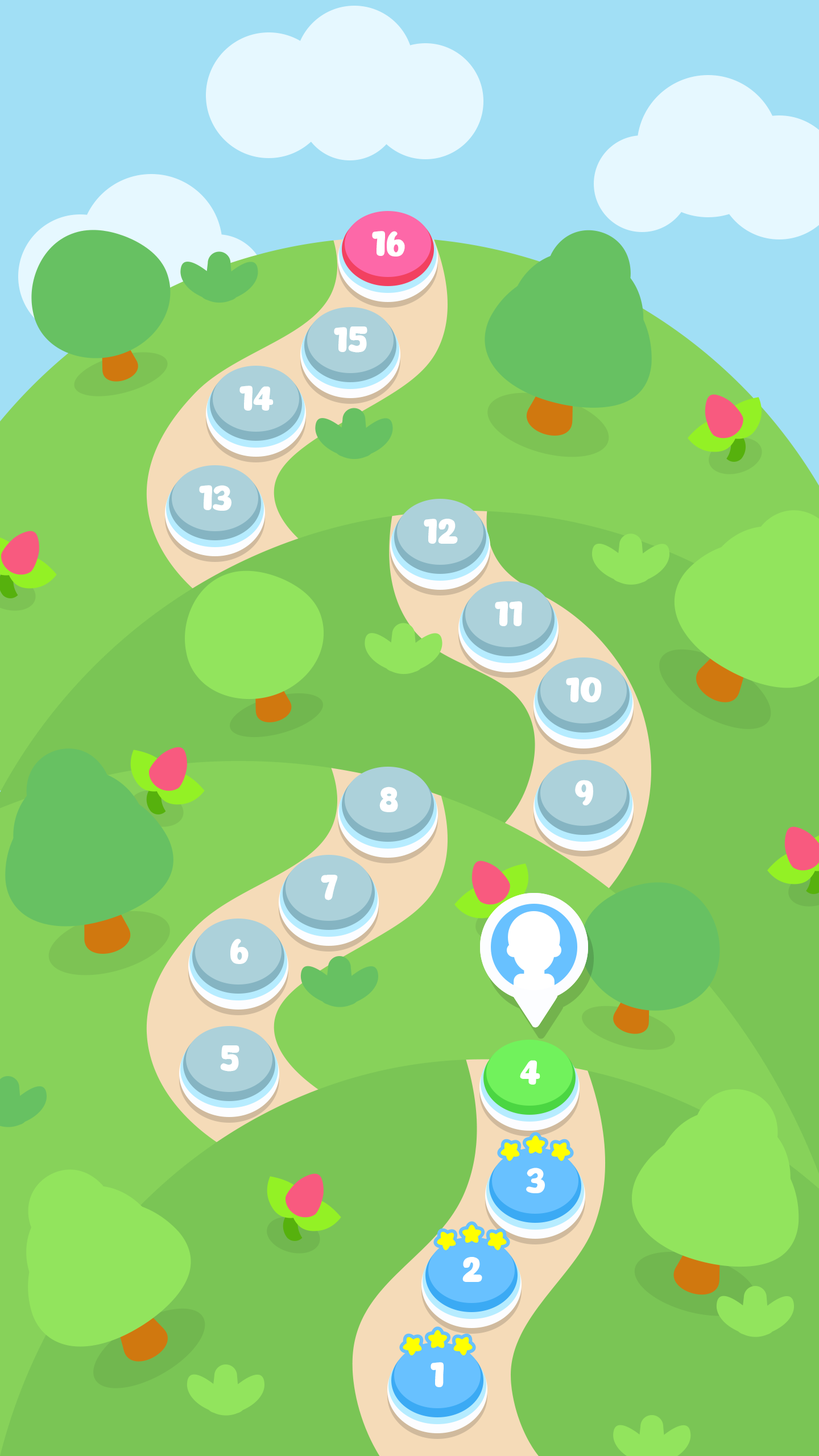
<style>
.page{position:relative;width:819px;height:1456px;background:#7ac555}
.page>*{position:absolute;margin:0}
.t1{font:34.1px "Eazy-Chat";letter-spacing:-0.02em;color:#ffffff}
</style>
<div class="page">
<p class="t1" style="left:372px;top:231px;width:33px;height:26px">16</p>
<p class="t1" style="left:334px;top:326px;width:33px;height:27px">15</p>
<p class="t1" style="left:239px;top:386px;width:35px;height:25px">14</p>
<p class="t1" style="left:199px;top:485px;width:32px;height:26px">13</p>
<p class="t1" style="left:424px;top:519px;width:34px;height:25px">12</p>
<p class="t1" style="left:495px;top:601px;width:27px;height:25px">11</p>
<p class="t1" style="left:566px;top:677px;width:36px;height:25px">10</p>
<p class="t1" style="left:575px;top:780px;width:18px;height:25px">9</p>
<p class="t1" style="left:379px;top:787px;width:19px;height:25px">8</p>
<p class="t1" style="left:321px;top:875px;width:17px;height:25px">7</p>
<p class="t1" style="left:230px;top:938px;width:19px;height:26px">6</p>
<p class="t1" style="left:220px;top:1045px;width:19px;height:27px">5</p>
<p class="t1" style="left:520px;top:1060px;width:20px;height:25px">4</p>
<p class="t1" style="left:526px;top:1168px;width:19px;height:25px">3</p>
<p class="t1" style="left:462px;top:1257px;width:20px;height:25px">2</p>
<p class="t1" style="left:431px;top:1362px;width:13px;height:25px">1</p>
</div>
